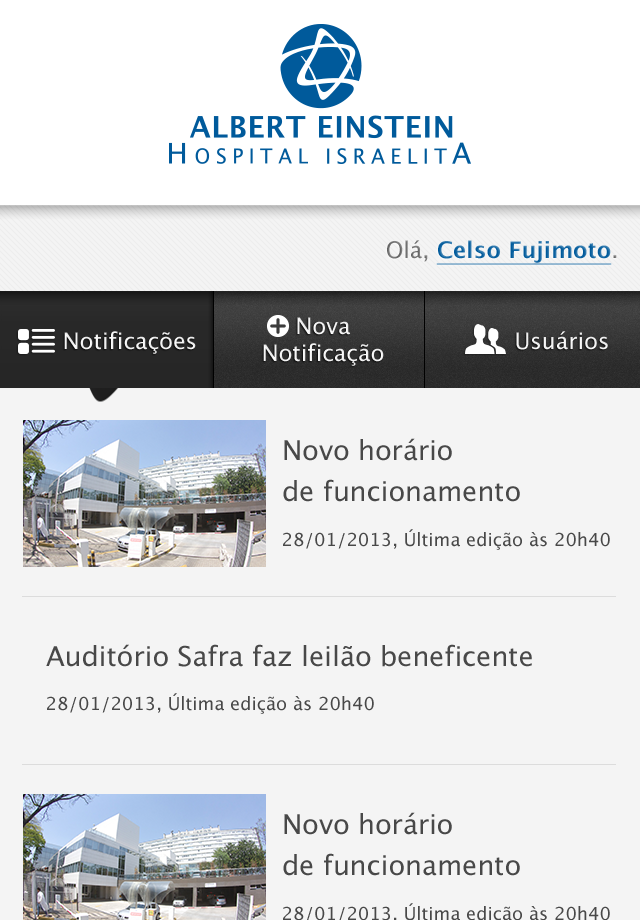
<style>
.page{position:relative;width:640px;height:920px;background:#f4f4f4}
.page>*{position:absolute;margin:0}
.t1{font:22.6px "LucidaGrande-Bold";text-decoration:underline}
.t2{font:22.6px "LucidaGrande"}
.t3{font:22.6px "LucidaGrande";color:#ffffff}
.t4{font:27.2px/40.8px "LucidaGrande";color:#484848}
.t5{font:18.1px "LucidaGrande";color:#484848}
.t6{font:27.2px "LucidaGrande";color:#484848}
</style>
<div class="page">
<p class="t1" style="left:387px;top:240px;width:230px;height:25px"><span class="t2">Olá, </span>Celso Fujimoto<span class="t2">.</span></p>
<p class="t3" style="left:263px;top:317px;width:121px;height:49px;text-align:center">Nova<br>Notificação</p>
<p class="t3" style="left:64px;top:331px;width:132px;height:23px">Notificações</p>
<p class="t3" style="left:516px;top:331px;width:92px;height:19px">Usuários</p>
<p class="t4" style="left:283px;top:438px;width:237px;height:64px">Novo horário<br>de funcionamento</p>
<p class="t5" style="left:283px;top:529px;width:327px;height:21px">28/01/2013, Última edição às 20h40</p>
<p class="t6" style="left:46px;top:644px;width:486px;height:23px">Auditório Safra faz leilão beneficente</p>
<p class="t5" style="left:47px;top:693px;width:327px;height:21px">28/01/2013, Última edição às 20h40</p>
<p class="t4" style="left:283px;top:812px;width:237px;height:64px">Novo horário<br>de funcionamento</p>
</div>
